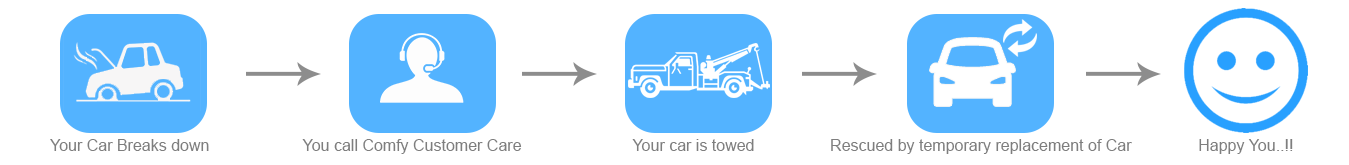
<style>
.page{position:relative;width:1349px;height:165px;background:#ffffff}
.page>*{position:absolute;margin:0}
.t1{font:16px "ArialMT";color:#7e7e7e}
</style>
<div class="page">
<p class="t1" style="left:50px;top:139px;width:1243px;height:15px">Your Car Breaks down                     You call Comfy Customer Care                         Your car is towed                 Rescued by temporary replacement of Car               Happy You..!!</p>
</div>
